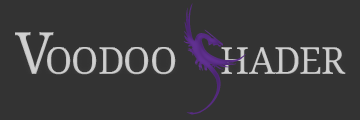
<style>
.page{position:relative;width:360px;height:120px;background:#333333}
.page>*{position:absolute;margin:0}
.t1{font:80px "neverworld";letter-spacing:-0.025em;color:#572c83;font-variant:small-caps}
.t2{font:53.3px "DroidSerif";letter-spacing:-0.025em;color:#d0d0d0;font-variant:small-caps}
.t3{font:57.8px "DroidSerif";letter-spacing:-0.14em;color:#d0d0d0;font-variant:small-caps}
</style>
<div class="page">
<p class="t1" style="left:183px;top:3px;width:63px;height:112px">?</p>
<p class="t2" style="left:15px;top:32px;width:331px;height:43px"><span class="t3">V</span>oodoo hader</p>
</div>
